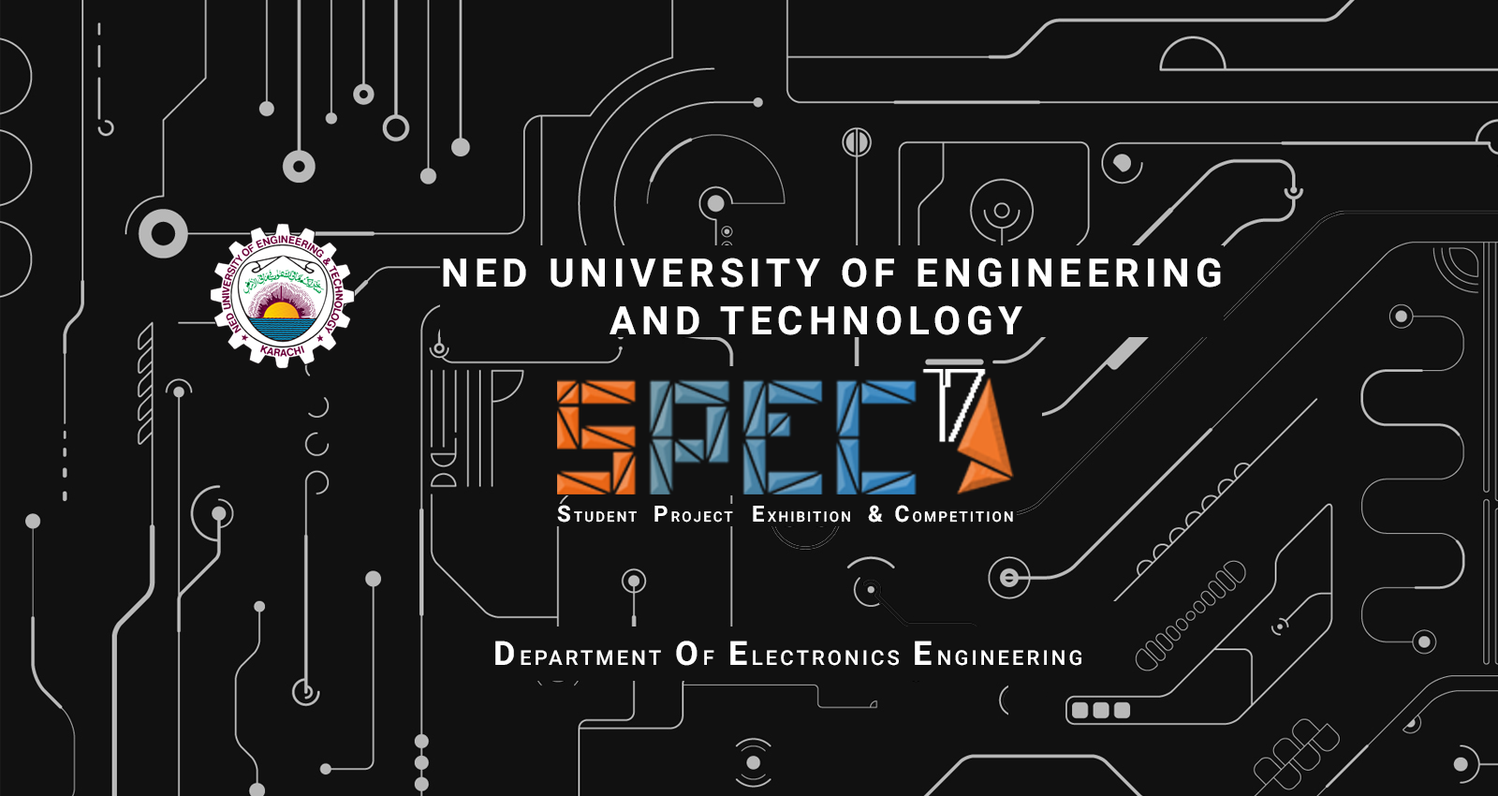
<style>
.page{position:relative;width:1498px;height:796px;background:#111111}
.page>*{position:absolute;margin:0}
.t1{font:39.3px "Roboto-Bold";letter-spacing:0.14em;color:#ffffff}
.t2{font:14px "Roboto-Medium";letter-spacing:0.14em;color:#ffffff}
.t3{font:22.5px "Roboto-Bold";letter-spacing:0.14em;color:#ffffff}
.t4{font:20.4px "Roboto-Medium";letter-spacing:0.14em;color:#ffffff}
.t5{font:33.3px "Roboto-Bold";letter-spacing:0.14em;color:#ffffff}
</style>
<div class="page">
<p class="t1" style="left:443px;top:258px;width:778px;height:77px">NED UNIVERSITY OF ENGINEERING <br>           AND TECHNOLOGY</p>
<p class="t2" style="left:557px;top:505px;width:80px;height:17px"><span class="t3">S</span>TUDENT</p>
<p class="t2" style="left:655px;top:506px;width:78px;height:16px"><span class="t3">P</span>ROJECT</p>
<p class="t2" style="left:753px;top:506px;width:97px;height:16px"><span class="t3">E</span>XHIBITION</p>
<p class="t2" style="left:868px;top:505px;width:145px;height:17px"><span class="t3">&amp; C</span>OMPETITION</p>
<p class="t4" style="left:495px;top:640px;width:587px;height:26px"><span class="t5">D</span>EPARTMENT  <span class="t5">O</span>F  <span class="t5">E</span>LECTRONICS  <span class="t5">E</span>NGINEERING</p>
</div>
